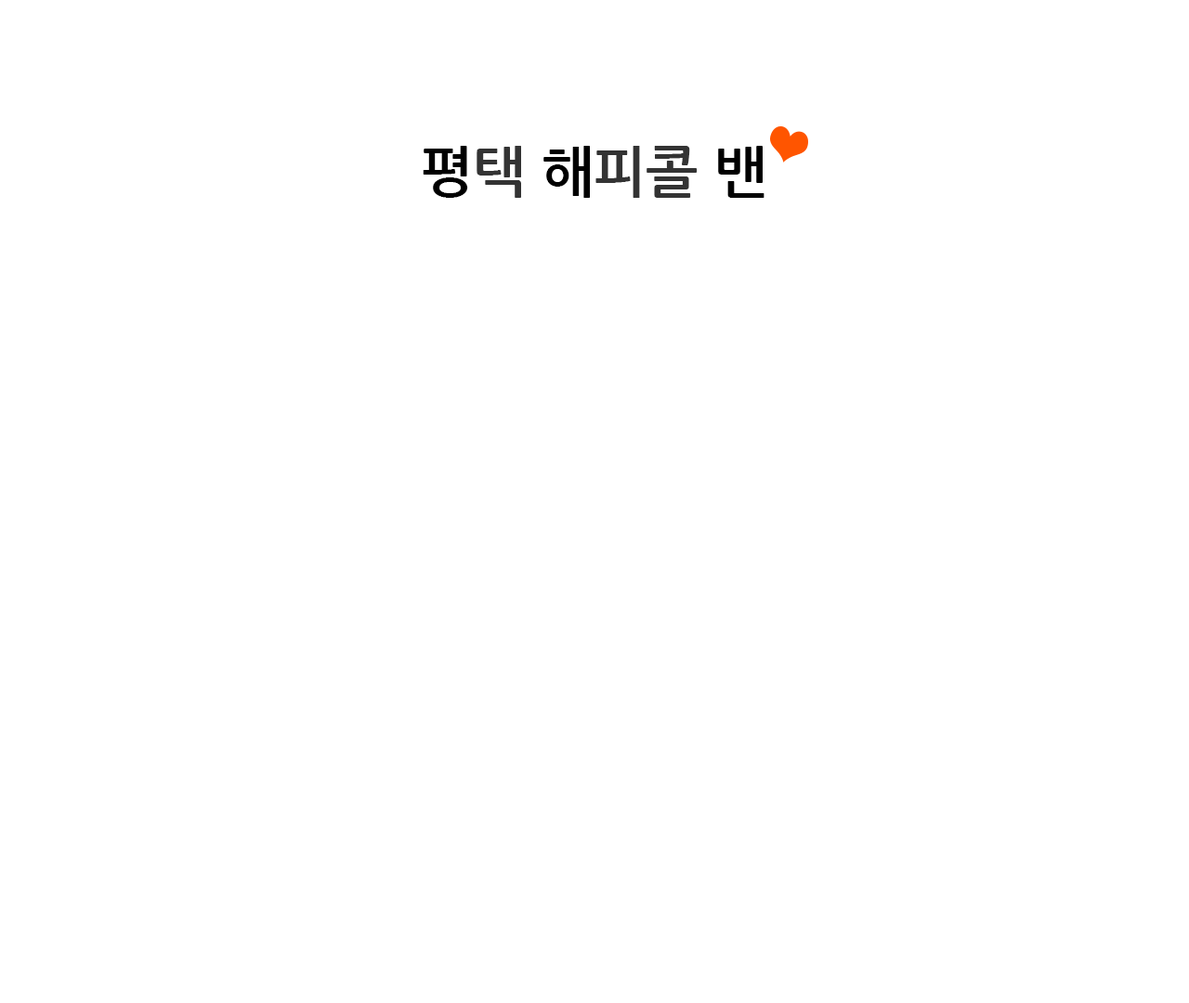
<style>
.page{position:relative;width:1189px;height:1003px;background:#ffffff}
.page>*{position:absolute;margin:0}
.t1{font:55.7px "NanumGothicBold";color:#333333}
.t2{font:55.7px "NanumGothicBold";color:#000000}
</style>
<div class="page">
<p class="t1" style="left:423px;top:146px;width:341px;height:52px"><span class="t2">평</span>택 <span class="t2">해</span>피콜 <span class="t2">밴</span></p>
</div>
